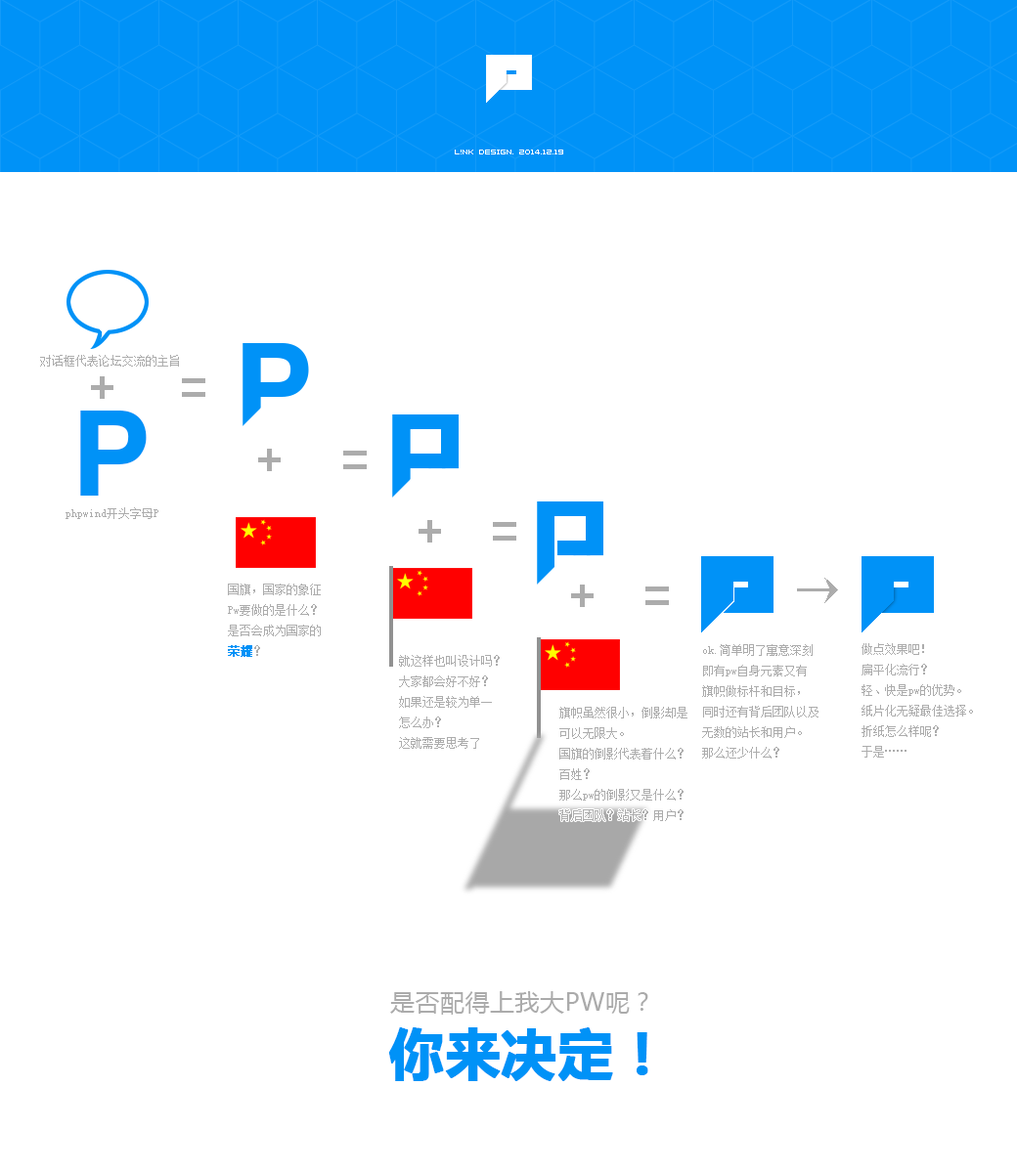
<style>
.page{position:relative;width:1017px;height:1173px;background:#ffffff}
.page>*{position:absolute;margin:0}
.t1{font:5.9px "04b08";color:#ffffff}
.t2{font:11.7px "SimSun";color:#acacac}
.t3{font:46.9px "WeibeiCSEG??NÑ²ó??";color:#acacac}
.t4{font:58.6px "WeibeiCSEG??NÑ²ó??";color:#acacac}
.t5{font:119.2px "CTCuYuanSF";color:#0092f7}
.t6{font:11.7px "SimSun";color:#0092f7;font-weight:bold}
.t7{font:24.9px "MicrosoftYaHei";color:#aaaaaa}
.t8{font:54.9px "MicrosoftYaHei-Bold";color:#0092f7;font-weight:bold}
</style>
<div class="page">
<p class="t1" style="left:455px;top:150px;width:108px;height:4px">l!nk design. 2014.12.19</p>
<p class="t2" style="left:40px;top:355px;width:139px;height:12px">对话框代表论坛交流的主旨</p>
<p class="t3" style="left:91px;top:376px;width:22px;height:23px">+</p>
<p class="t4" style="left:182px;top:378px;width:23px;height:19px">=</p>
<p class="t5" style="left:80px;top:411px;width:67px;height:85px">P</p>
<p class="t3" style="left:258px;top:449px;width:23px;height:22px">+</p>
<p class="t4" style="left:343px;top:451px;width:24px;height:18px">=</p>
<p class="t2" style="left:65px;top:507px;width:93px;height:12px">phpwind开头字母P</p>
<p class="t3" style="left:418px;top:520px;width:23px;height:23px">+</p>
<p class="t4" style="left:493px;top:522px;width:23px;height:19px">=</p>
<p class="t3" style="left:797px;top:578px;width:41px;height:25px">→</p>
<p class="t2" style="left:228px;top:584px;width:93px;height:73px">国旗，国家的象征<br>Pw要做的是什么？<br>是否会成为国家的<br><span class="t6">荣耀</span>？</p>
<p class="t3" style="left:571px;top:585px;width:22px;height:22px">+</p>
<p class="t4" style="left:645px;top:586px;width:24px;height:19px">=</p>
<p class="t2" style="left:702px;top:644px;width:116px;height:115px">ok.简单明了寓意深刻<br>即有pw自身元素又有<br>旗帜做标杆和目标，<br>同时还有背后团队以及<br>无数的站长和用户。<br>那么还少什么？</p>
<p class="t2" style="left:861px;top:643px;width:112px;height:115px">做点效果吧！<br>扁平化流行？<br>轻、快是pw的优势。<br>纸片化无疑最佳选择。<br>折纸怎么样呢？<br>于是……</p>
<p class="t2" style="left:399px;top:655px;width:100px;height:94px">就这样也叫设计吗？<br>大家都会好不好？<br>如果还是较为单一<br>怎么办？<br>这就需要思考了</p>
<p class="t2" style="left:559px;top:707px;width:128px;height:114px">旗帜虽然很小，倒影却是<br>可以无限大。<br>国旗的倒影代表着什么？<br>百姓？<br>那么pw的倒影又是什么？<br>背后团队？站长？用户？</p>
<p class="t7" style="left:390px;top:991px;width:258px;height:24px">是否配得上我大PW呢？</p>
<p class="t8" style="left:388px;top:1027px;width:260px;height:54px">你来决定！</p>
</div>
